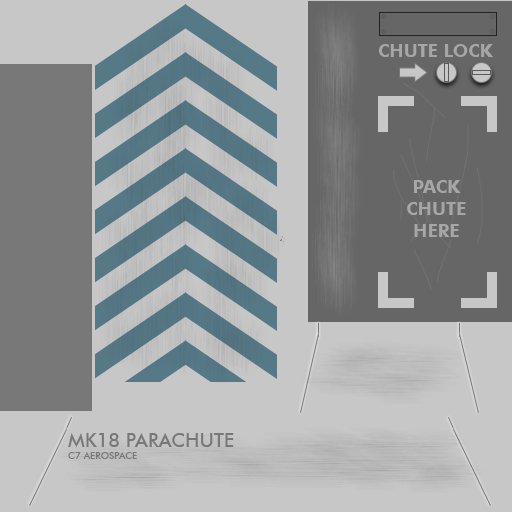
<style>
.page{position:relative;width:512px;height:512px;background:#c7c7c7}
.page>*{position:absolute;margin:0}
.t1{font:18px "FuturaBT-Bold";color:#a6a6a6}
.t2{font:19px "FuturaBT-Medium";color:#787878}
.t3{font:9.5px "FuturaBT-Medium";color:#787878}
</style>
<div class="page">
<p class="t1" style="left:378px;top:44px;width:115px;height:13px">CHUTE LOCK</p>
<p class="t1" style="left:407px;top:180px;width:59px;height:57px;text-align:center">PACK<br>CHUTE<br>HERE</p>
<p class="t2" style="left:68px;top:433px;width:166px;height:26px">MK18 PARACHUTE<br><span class="t3">C7 AEROSPACE</span></p>
</div>
